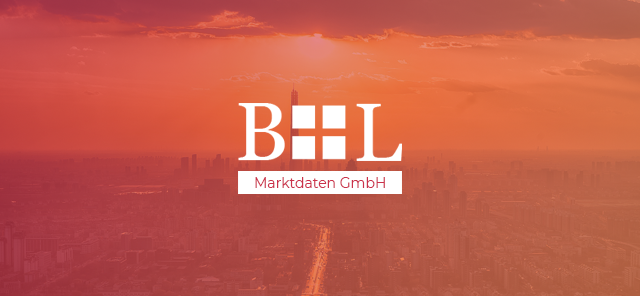
<style>
.page{position:relative;width:640px;height:296px}
.page>*{position:absolute;margin:0}
.t1{font:14px "Montserrat-Regular";color:#cb324b}
</style>
<div class="page">
<p class="t1" style="left:255px;top:177px;width:130px;height:11px">Marktdaten GmbH</p>
</div>
